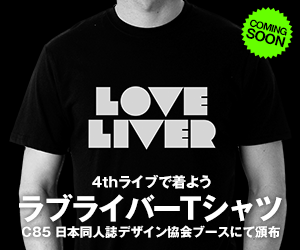
<style>
.page{position:relative;width:300px;height:250px;background:#000000}
.page>*{position:absolute;margin:0}
.t1{font:14.3px "HelveticaNeue-Bold";letter-spacing:-0.05em;color:#000000}
.t2{font:10.2px "HelveticaNeue-Bold";letter-spacing:-0.075em;color:#000000}
.t3{font:14px "GothicMB101Pro-Bold";color:#ffffff}
.t4{font:29.5px "GothicMB101Pro-Bold";letter-spacing:-0.075em;color:#ffffff}
.t5{font:12.7px "GothicMB101Pro-Bold";color:#ffffff}
</style>
<div class="page">
<p class="t1" style="left:246px;top:28px;width:40px;height:20px;rotate:15deg">SOON</p>
<p class="t2" style="left:250px;top:19px;width:37px;height:17px;rotate:15deg">COMING</p>
<p class="t3" style="left:92px;top:175px;width:119px;height:14px">4thライブで着よう</p>
<p class="t4" style="left:19px;top:194px;width:263px;height:29px">ラブライバーTシャツ</p>
<p class="t5" style="left:22px;top:225px;width:258px;height:13px">C85 日本同人誌デザイン協会ブースにて頒布</p>
</div>
